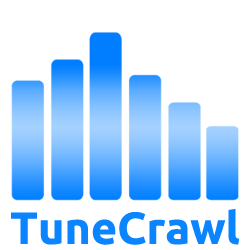
<style>
.page{position:relative;width:250px;height:250px;background:#ffffff}
.page>*{position:absolute;margin:0}
.t1{font:45px "Ubuntu-Bold";color:#0a84ff}
</style>
<div class="page">
<p class="t1" style="left:11px;top:208px;width:229px;height:37px">TuneCrawl</p>
</div>
